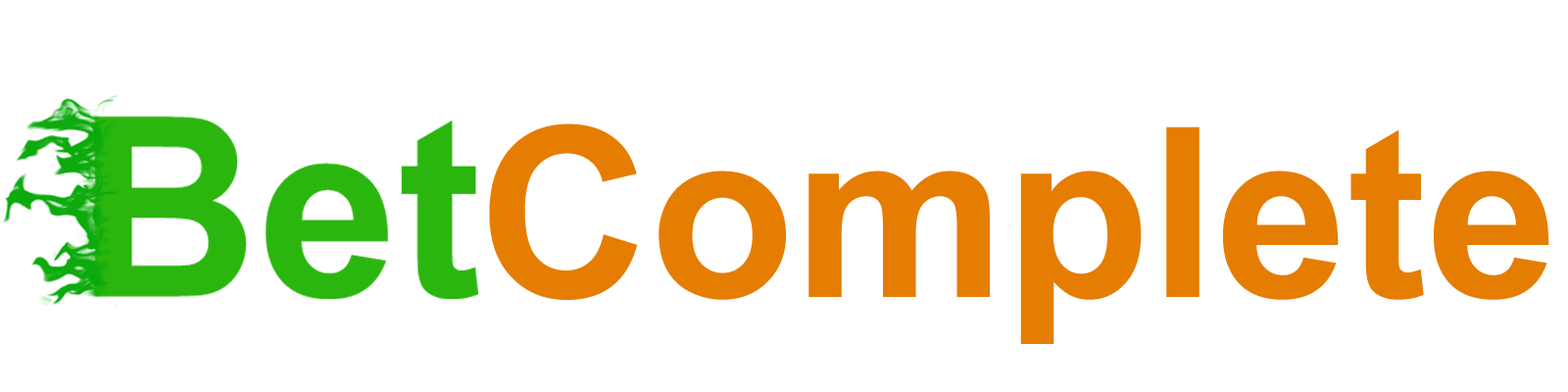
<style>
.page{position:relative;width:1568px;height:392px;background:#ffffff}
.page>*{position:absolute;margin:0}
.t1{font:237px "Arial-BoldMT";color:#e57d03}
</style>
<div class="page">
<p class="t1" style="left:489px;top:123px;width:1060px;height:221px">Complete</p>
</div>
